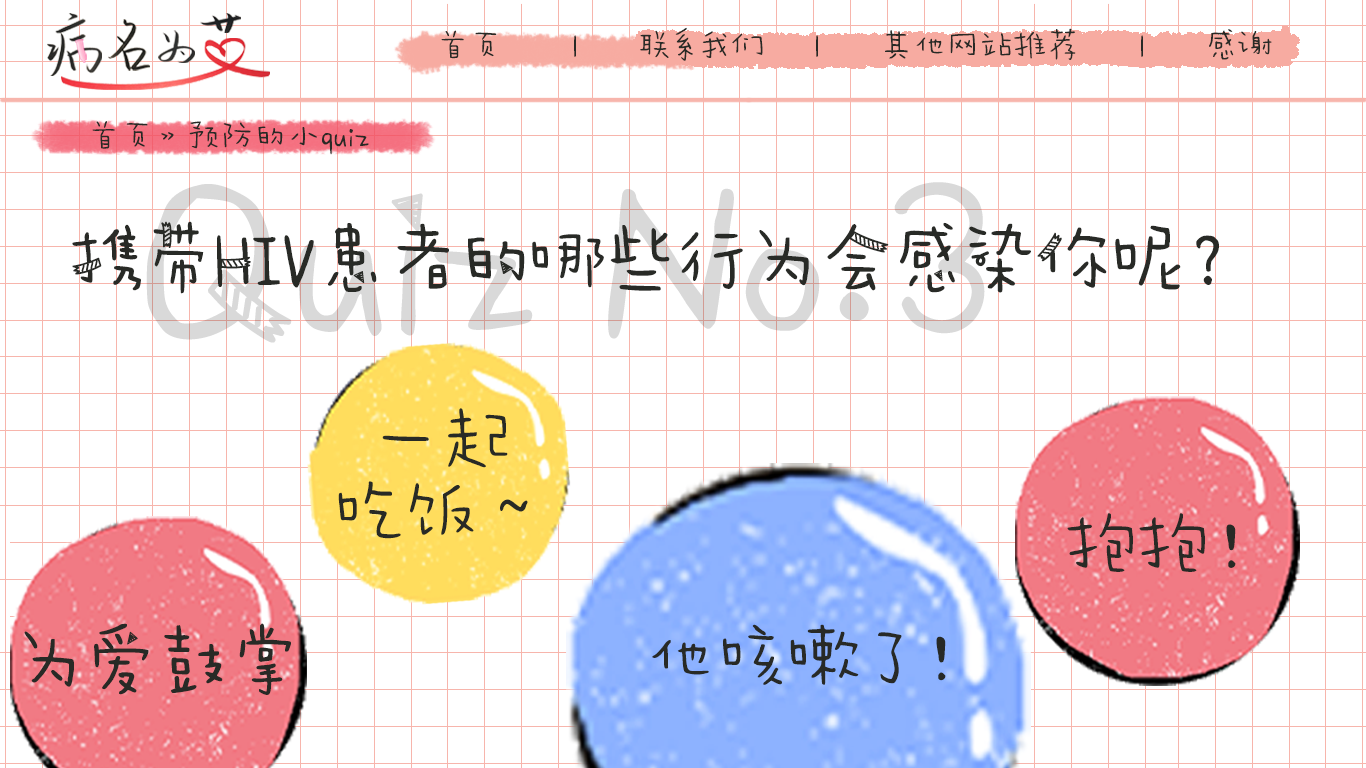
<style>
.page{position:relative;width:1366px;height:768px;background:#ffffff}
.page>*{position:absolute;margin:0}
.t1{font:33.3px "AaWanWan";color:#282a26}
.t2{font:72px "AaPaperTape";color:#282a26}
.t3{font:72px/72px "AaWanWan";color:#282a26}
.t4{font:72px "AaWanWan";color:#282a26}
</style>
<div class="page">
<p class="t1" style="left:441px;top:27px;width:831px;height:34px">首页       |      联系我们     |      其他网站推荐      |      感谢</p>
<p class="t1" style="left:92px;top:121px;width:277px;height:34px">首页》预防的小quiz</p>
<p class="t2" style="left:72px;top:221px;width:1147px;height:73px">携带HIV患者的哪些行为会感染你呢？</p>
<p class="t3" style="left:338px;top:408px;width:190px;height:131px;text-align:center">一起<br>吃饭～</p>
<p class="t4" style="left:1067px;top:513px;width:169px;height:59px">抱抱！</p>
<p class="t2" style="left:24px;top:623px;width:267px;height:72px">为爱鼓掌</p>
<p class="t4" style="left:652px;top:624px;width:294px;height:61px">他咳嗽了！</p>
</div>
